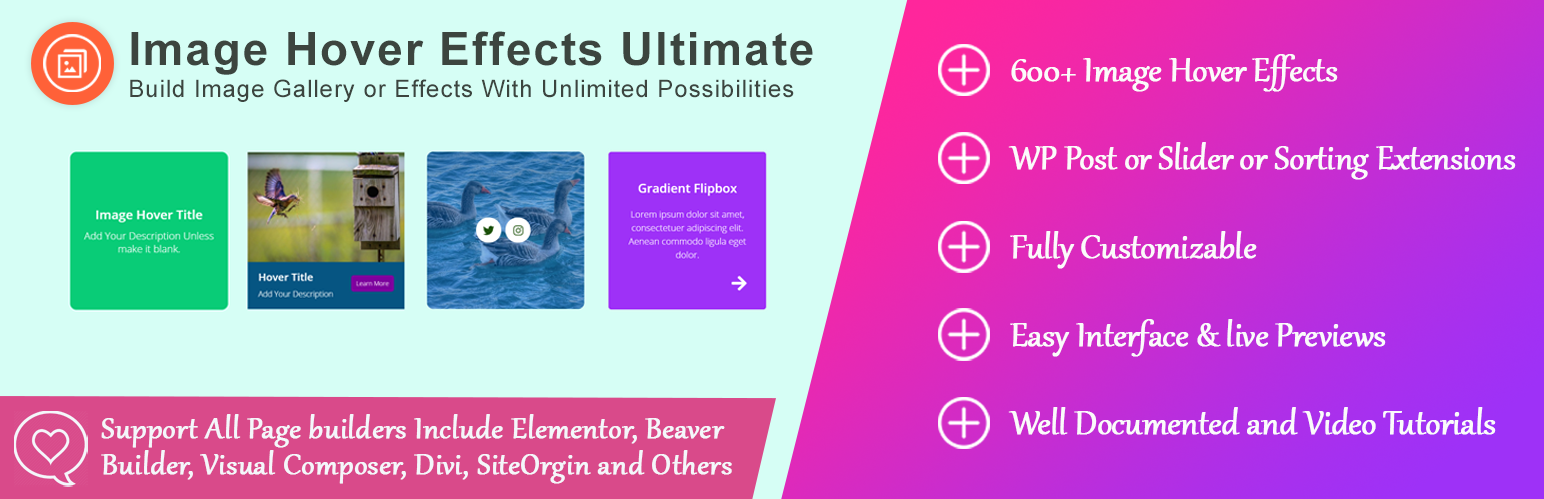
<style>
.page{position:relative;width:1544px;height:499px;background:#d6fef5}
.page>*{position:absolute;margin:0}
.t1{font:24px/32px "ArialMT";letter-spacing:0.04em;color:#3c453f}
.t2{font:46px/32px "Arial-BoldMT";letter-spacing:0.04em;color:#3c453f}
.t3{font:41px "Gabriola";letter-spacing:-0.02em;color:#fbfbfb;font-weight:bold}
.t4{font:36px/36px "Gabriola";color:#f4f7fb;font-weight:bold}
</style>
<div class="page">
<p class="t1" style="left:130px;top:31px;width:683px;height:71px"><span class="t2">Image Hover Effects Ultimate<br></span>Build Image Gallery or Effects With Unlimited Possibilities</p>
<p class="t3" style="left:1011px;top:54px;width:327px;height:38px">600+ Image Hover Effects</p>
<p class="t3" style="left:1008px;top:142px;width:508px;height:38px">WP Post or Slider or Sorting Extensions</p>
<p class="t3" style="left:1010px;top:231px;width:247px;height:38px">Fully Customizable</p>
<p class="t3" style="left:1010px;top:319px;width:376px;height:38px">Easy Interface &amp; live Previews</p>
<p class="t4" style="left:101px;top:414px;width:631px;height:70px">Support All Page builders Include Elementor, Beaver <br>Builder, Visual Composer, Divi, SiteOrgin and Others</p>
<p class="t3" style="left:1008px;top:407px;width:488px;height:28px">Well Documented and Video Tutorials</p>
</div>
